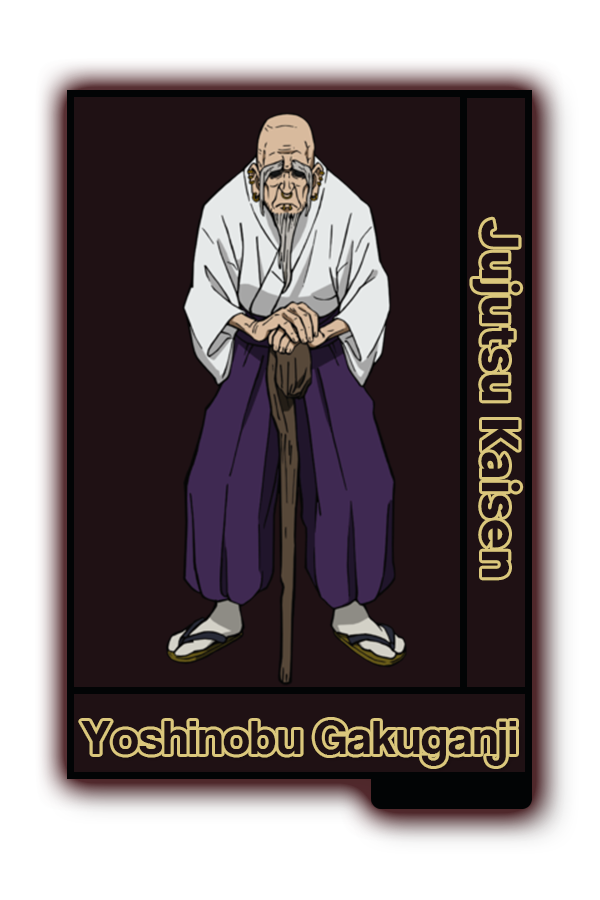
<style>
.page{position:relative;width:600px;height:900px;background:#1f1114}
.page>*{position:absolute;margin:0}
.t1{font:52px "MADETOMMY-Bold";color:#1e1214}
.t2{font:50.5px "CoolveticaRg-Regular";color:#1e1214}
</style>
<div class="page">
<p class="t1" style="left:472px;top:219px;width:49px;height:359px;rotate:90deg">Jujutsu Kaisen</p>
<p class="t2" style="left:81px;top:720px;width:435px;height:46px">Yoshinobu Gakuganji</p>
</div>
